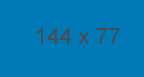
<style>
.page{position:relative;width:144px;height:77px;background:#007ab6}
.page>*{position:absolute;margin:0}
.t1{font:22.4px "ArialMT";color:#4b4b4b}
</style>
<div class="page">
<p class="t1" style="left:37px;top:27px;width:83px;height:17px">144 x 77</p>
</div>
